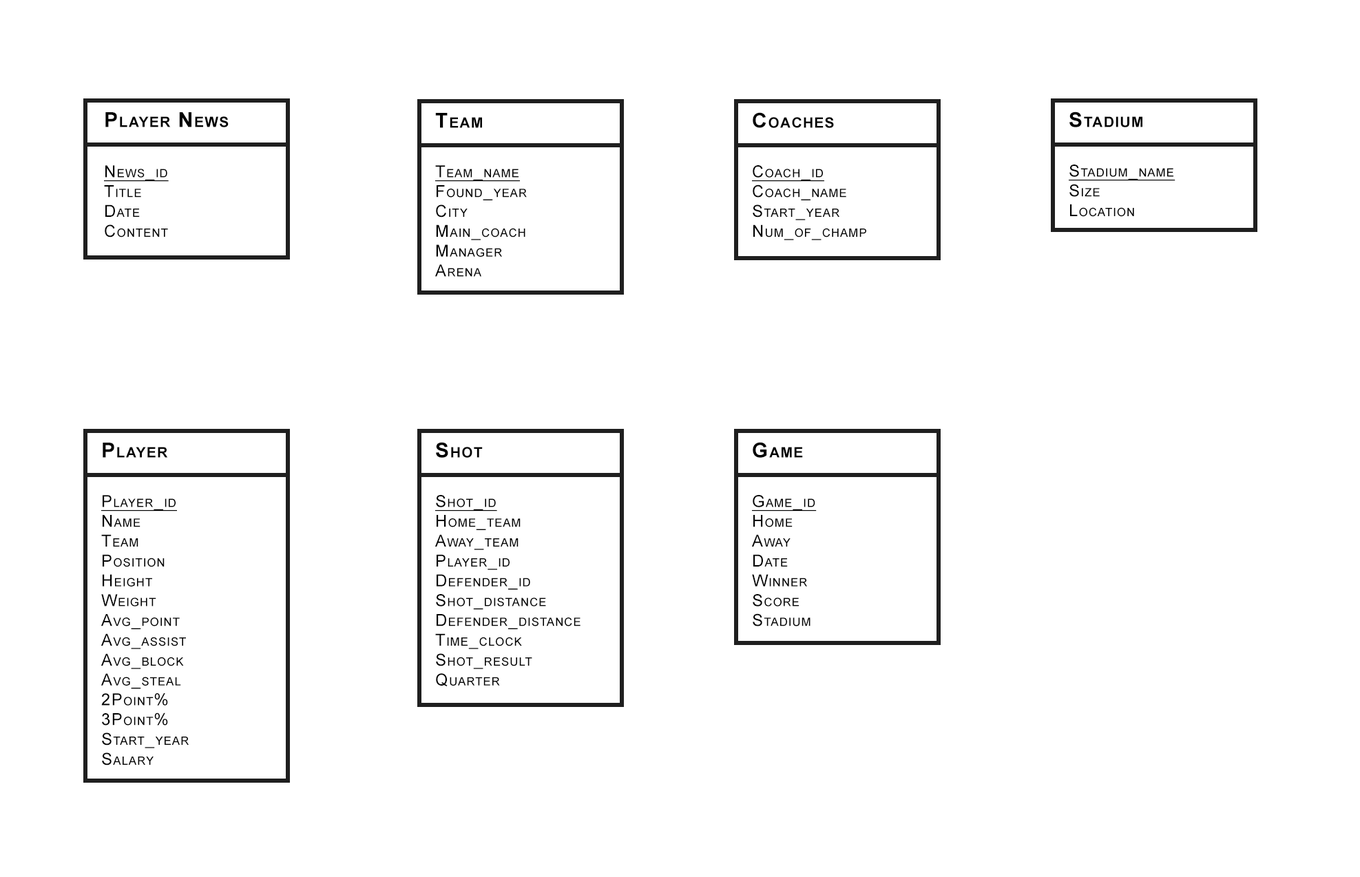
<style>
.page{position:relative;width:1360px;height:877px;background:#ffffff}
.page>*{position:absolute;margin:0}
.t1{font:20.7px "Arial-BoldMT";letter-spacing:0.06em;color:#000000;font-variant:small-caps}
.t2{font:16.5px "ArialMT";letter-spacing:0.06em;color:#000000;font-variant:small-caps}
.t3{font:16.5px "ArialMT";letter-spacing:0.06em;color:#000000;font-variant:small-caps;text-decoration:underline}
</style>
<div class="page">
<p class="t1" style="left:105px;top:112px;width:124px;height:15px">Player News</p>
<p class="t1" style="left:435px;top:113px;width:47px;height:15px">Team</p>
<p class="t1" style="left:752px;top:112px;width:82px;height:16px">Coaches</p>
<p class="t1" style="left:1069px;top:112px;width:73px;height:15px">Stadium</p>
<p class="t2" style="left:104px;top:165px;width:65px;height:73px"><span class="t3">News_id<br></span>Title<br>Date<br>Content</p>
<p class="t2" style="left:435px;top:165px;width:92px;height:112px"><span class="t3">Team_name<br></span>Found_year<br>City<br>Main_coach<br>Manager<br>Arena</p>
<p class="t2" style="left:752px;top:165px;width:114px;height:75px"><span class="t3">Coach_id<br></span>Coach_name<br>Start_year<br>Num_of_champ</p>
<p class="t2" style="left:1068px;top:165px;width:107px;height:52px"><span class="t3">Stadium_name<br></span>Size<br>Location</p>
<p class="t1" style="left:103px;top:443px;width:65px;height:15px">Player</p>
<p class="t1" style="left:436px;top:442px;width:47px;height:16px">Shot</p>
<p class="t1" style="left:752px;top:442px;width:51px;height:16px">Game</p>
<p class="t2" style="left:101px;top:495px;width:88px;height:271px"><span class="t3">Player_id<br></span>Name <br>Team<br>Position<br>Height<br>Weight<br>Avg_point<br>Avg_assist<br>Avg_block<br>Avg_steal<br>2Point%<br>3Point%<br>Start_year<br>Salary</p>
<p class="t2" style="left:435px;top:495px;width:145px;height:191px"><span class="t3">Shot_id<br></span>Home_team<br>Away_team<br>Player_id<br>Defender_id<br>Shot_distance<br>Defender_distance<br>Time_clock<br>Shot_result<br>Quarter</p>
<p class="t2" style="left:752px;top:495px;width:64px;height:131px"><span class="t3">Game_id<br></span>Home<br>Away<br>Date<br>Winner<br>Score<br>Stadium</p>
</div>
